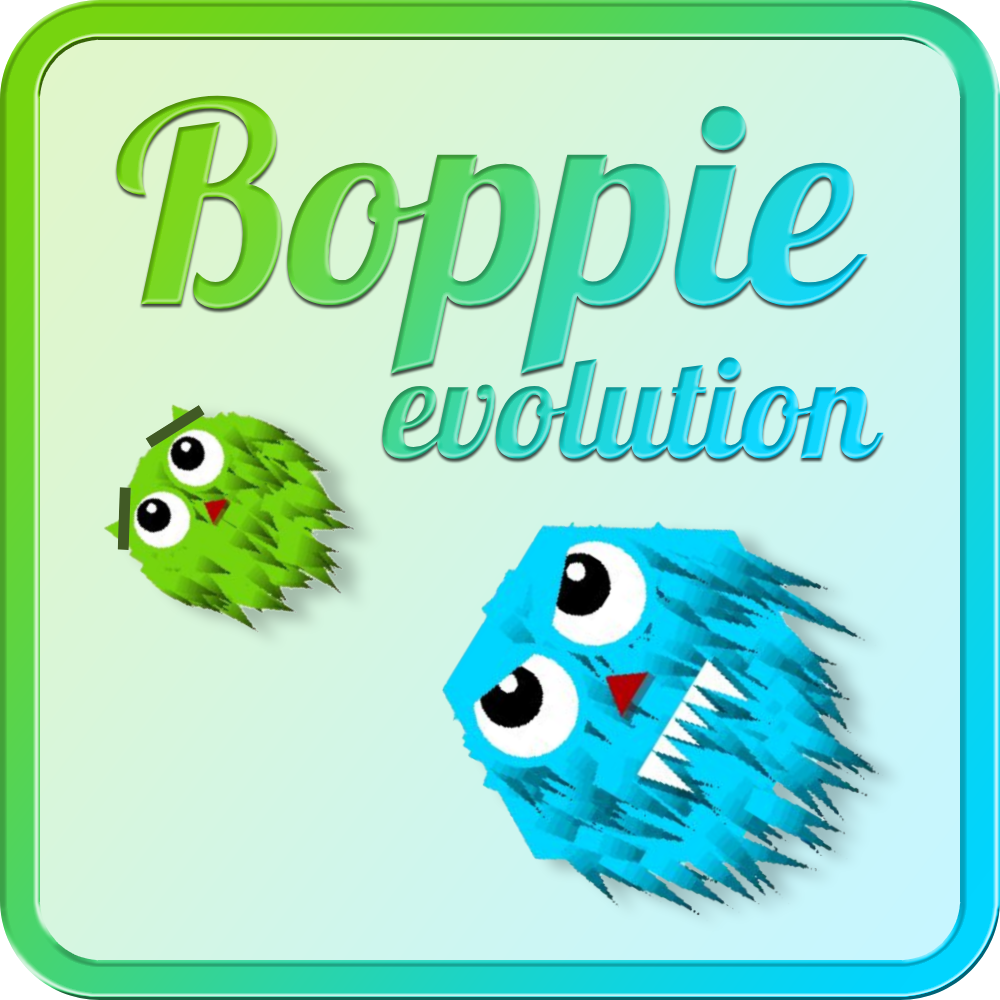
<style>
.page{position:relative;width:1000px;height:1000px}
.page>*{position:absolute;margin:0}
.t1{font:277.7px "Galada-Regular"}
.t2{font:141.3px "Galada-Regular"}
</style>
<div class="page">
<p class="t1" style="left:116px;top:95px;width:752px;height:279px">Boppie</p>
<p class="t2" style="left:382px;top:357px;width:502px;height:102px">evolution</p>
</div>
